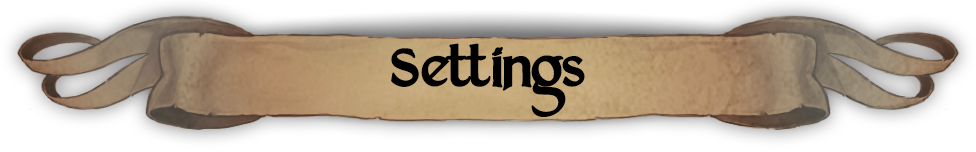
<style>
.page{position:relative;width:976px;height:152px}
.page>*{position:absolute;margin:0}
.t1{font:56px "DragonFire";color:#000000;font-weight:bold}
</style>
<div class="page">
<p class="t1" style="left:391px;top:43px;width:194px;height:74px">Settings</p>
</div>
